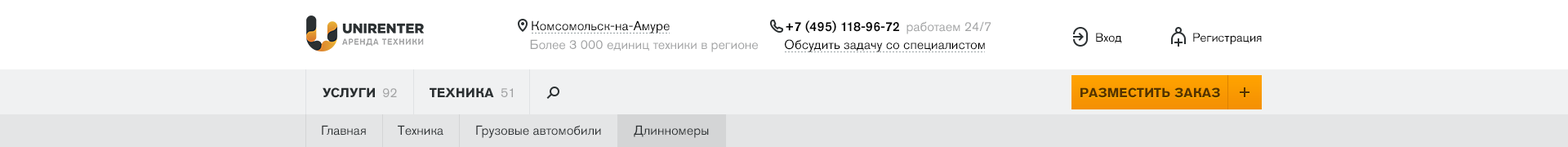
<style>
.page{position:relative;width:1568px;height:147px;background:#ffffff}
.page>*{position:absolute;margin:0}
.t1{font:13.1px "AkzidenzGroteskPro-Regular";color:#000000}
.t2{font:13.1px "AkzidenzGroteskPro-Md";color:#000000}
.t3{font:13.1px "AkzidenzGroteskPro-Regular";color:#a1a2a3}
.t4{font:12.2px "AkzidenzGroteskPro-Regular";color:#000000}
.t5{font:13.1px "AkzidenzGroteskPro-Bold";color:#2b3032;text-transform:uppercase}
.t6{font:13.1px "AkzidenzGroteskPro-Regular";color:#a1a2a3;text-transform:uppercase}
.t7{font:13.1px "AkzidenzGroteskPro-Bold";color:#563301;text-transform:uppercase}
.t8{font:13.1px "AkzidenzGroteskPro-Regular";color:#2b3032}
</style>
<div class="page">
<p class="t1" style="left:532px;top:20px;width:138px;height:13px">Комсомольск-на-Амуре</p>
<p class="t2" style="left:786px;top:20px;width:113px;height:13px">+7 (495) 118-96-72</p>
<p class="t3" style="left:906px;top:21px;width:85px;height:13px">работаем 24/7</p>
<p class="t3" style="left:530px;top:39px;width:228px;height:13px">Более 3 000 единиц техники в регионе</p>
<p class="t1" style="left:785px;top:39px;width:200px;height:13px">Обсудить задачу со специалистом</p>
<p class="t4" style="left:1096px;top:33px;width:26px;height:10px">Вход</p>
<p class="t4" style="left:1193px;top:33px;width:69px;height:12px">Регистрация</p>
<p class="t5" style="left:323px;top:87px;width:52px;height:11px">Услуги</p>
<p class="t6" style="left:383px;top:88px;width:14px;height:9px">92</p>
<p class="t5" style="left:430px;top:87px;width:64px;height:10px">техника</p>
<p class="t6" style="left:501px;top:88px;width:12px;height:9px">51</p>
<p class="t7" style="left:1080px;top:87px;width:140px;height:11px">разместить заказ</p>
<p class="t8" style="left:322px;top:125px;width:44px;height:11px">Главная</p>
<p class="t8" style="left:398px;top:125px;width:45px;height:11px">Техника</p>
<p class="t8" style="left:476px;top:125px;width:125px;height:13px">Грузовые автомобили</p>
<p class="t8" style="left:634px;top:125px;width:75px;height:13px">Длинномеры</p>
</div>
